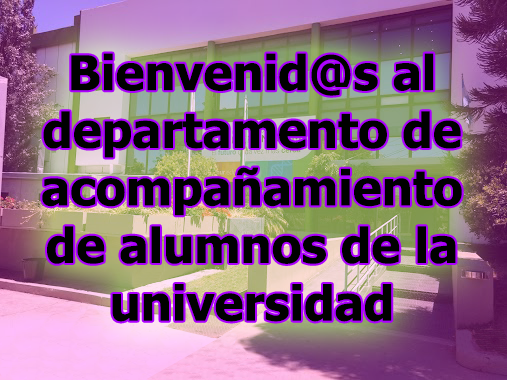
<style>
.page{position:relative;width:507px;height:380px}
.page>*{position:absolute;margin:0}
.t1{font:48px "Tahoma-Bold";color:#000000}
</style>
<div class="page">
<p class="t1" style="left:42px;top:53px;width:420px;height:269px;text-align:center">Bienvenid@s al departamento de acompañamiento de alumnos de la universidad</p>
</div>
